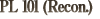
<style>
.page{position:relative;width:100px;height:19px;background:#ffffff}
.page>*{position:absolute;margin:0}
.t1{font:16px "RyuminPro-ExBold";letter-spacing:-0.08em;color:#4a3f32;font-weight:bold;scale:0.9 1}
</style>
<div class="page">
<p class="t1" style="left:0px;top:0px;width:93px;height:16px">PL 101 (Recon.)</p>
</div>
